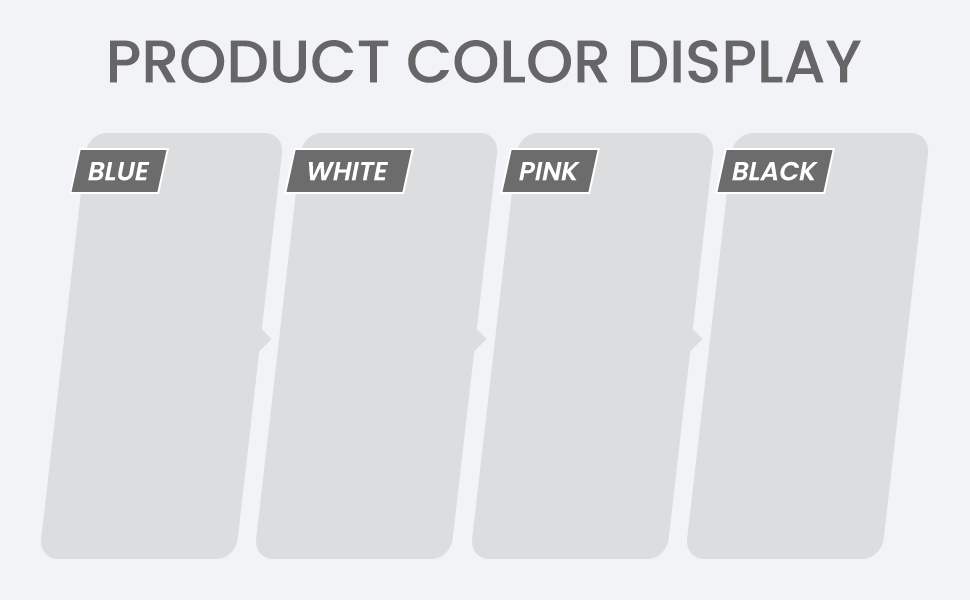
<style>
.page{position:relative;width:970px;height:600px;background:#dcdddf}
.page>*{position:absolute;margin:0}
.t1{font:60px "Poppins-Medium";color:#666666;text-transform:uppercase}
.t2{font:26px "Poppins-SemiBold";color:#ffffff;text-transform:uppercase;font-style:italic}
</style>
<div class="page">
<p class="t1" style="left:110px;top:40px;width:751px;height:43px">Product color display</p>
<p class="t2" style="left:732px;top:161px;width:86px;height:20px">BLACK</p>
<p class="t2" style="left:88px;top:162px;width:62px;height:19px">BLUE</p>
<p class="t2" style="left:308px;top:162px;width:80px;height:19px">WHITE</p>
<p class="t2" style="left:519px;top:162px;width:61px;height:19px">PINK</p>
</div>
